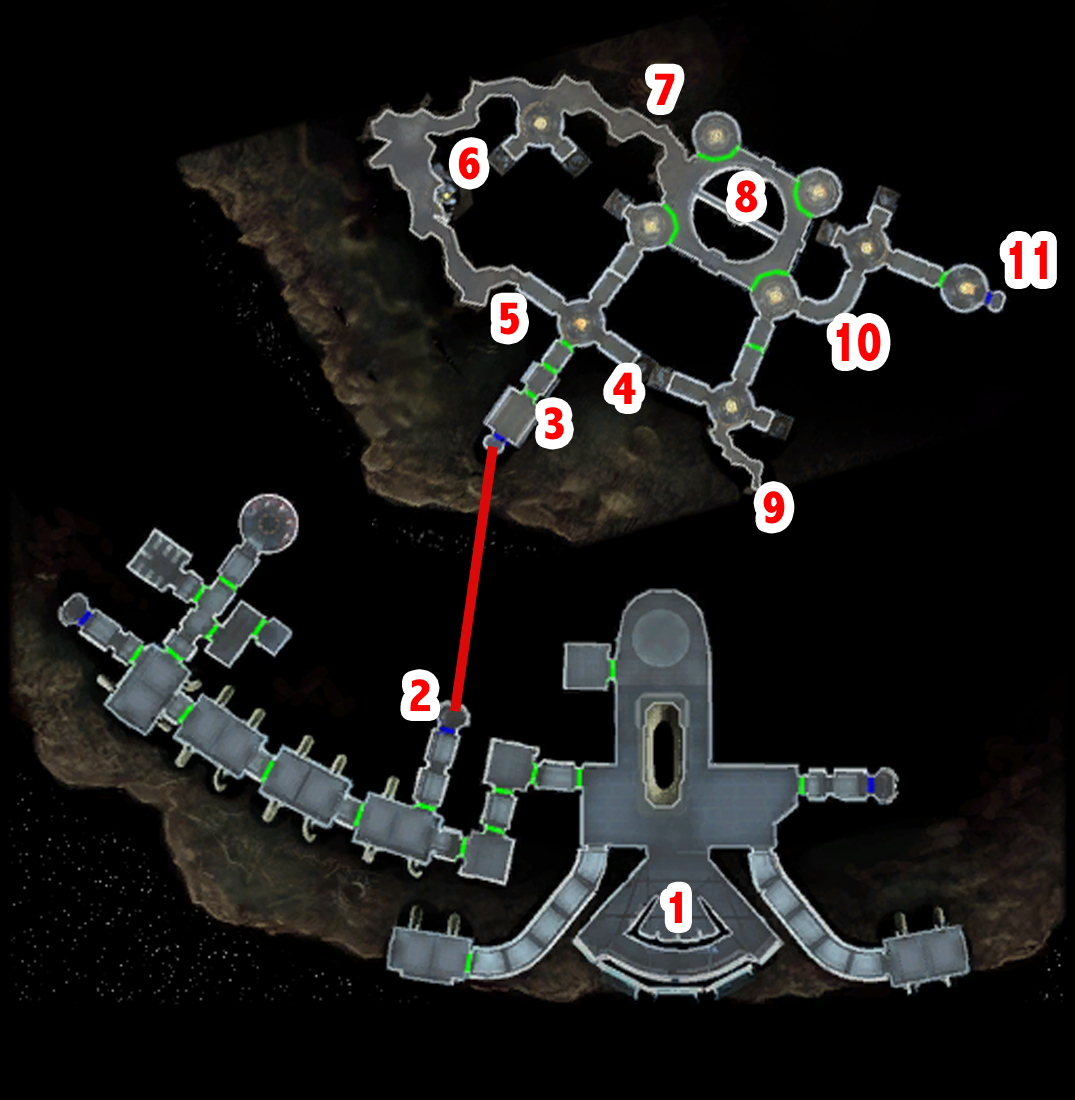
<style>
.page{position:relative;width:1075px;height:1100px;background:#000000}
.page>*{position:absolute;margin:0}
.t1{font:48px "AbadiMT-CondensedExtraBold";color:#ff0000}
.t2{font:58.1px "AbadiMT-CondensedExtraBold";color:#ff0000;scale:0.83 1}
</style>
<div class="page">
<p class="t1" style="left:655px;top:73px;width:20px;height:32px">7</p>
<p class="t1" style="left:458px;top:147px;width:22px;height:33px">6</p>
<p class="t1" style="left:735px;top:180px;width:23px;height:33px">8</p>
<p class="t2" style="left:1009px;top:241px;width:38px;height:38px">11</p>
<p class="t1" style="left:500px;top:302px;width:19px;height:33px">5</p>
<p class="t2" style="left:836px;top:323px;width:45px;height:38px">10</p>
<p class="t1" style="left:613px;top:372px;width:23px;height:32px">4</p>
<p class="t1" style="left:545px;top:407px;width:19px;height:33px">3</p>
<p class="t1" style="left:763px;top:491px;width:22px;height:33px">9</p>
<p class="t1" style="left:410px;top:679px;width:20px;height:32px">2</p>
<p class="t1" style="left:669px;top:891px;width:13px;height:32px">1</p>
</div>
